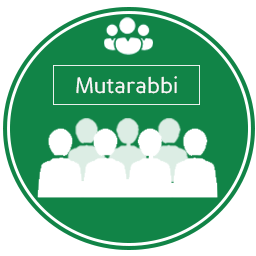
<style>
.page{position:relative;width:256px;height:256px;background:#118447}
.page>*{position:absolute;margin:0}
.t1{font:22.2px "PerspectiveSans";color:#f7f7f7}
</style>
<div class="page">
<p class="t1" style="left:76px;top:76px;width:101px;height:18px">Mutarabbi</p>
</div>
